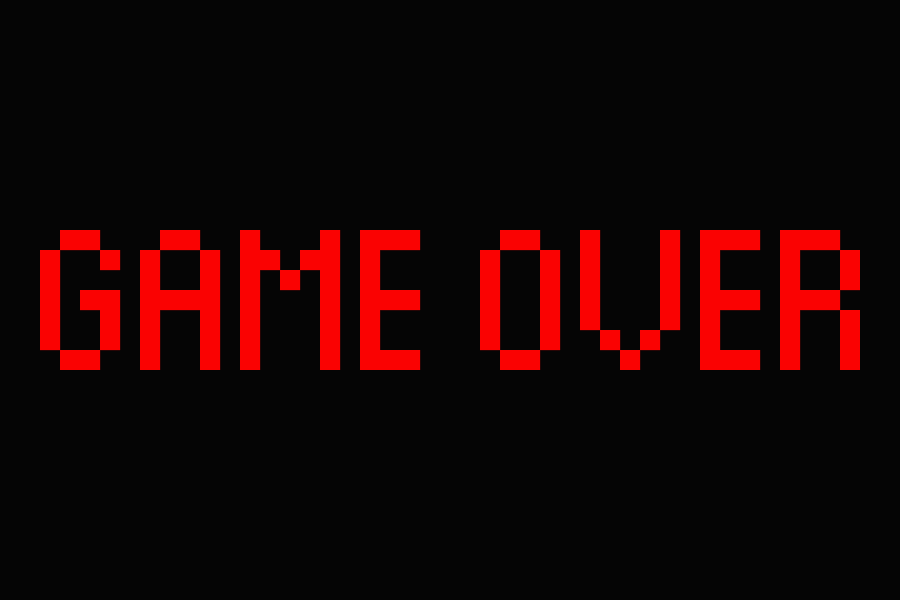
<style>
.page{position:relative;width:900px;height:600px;background:#050505}
.page>*{position:absolute;margin:0}
.t1{font:320px "Thintel";color:#fa0202}
</style>
<div class="page">
<p class="t1" style="left:40px;top:230px;width:820px;height:140px">GAME OVER</p>
</div>
